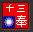
<style>
.page{position:relative;width:33px;height:32px;background:#f20000}
.page>*{position:absolute;margin:0}
.t1{font:10.4px "SimSun";color:#ffffff}
.t2{font:11.7px "SimSun";color:#ffffff}
</style>
<div class="page">
<p class="t1" style="left:6px;top:4px;width:19px;height:8px">十三</p>
<p class="t2" style="left:16px;top:15px;width:11px;height:12px">奉</p>
</div>
